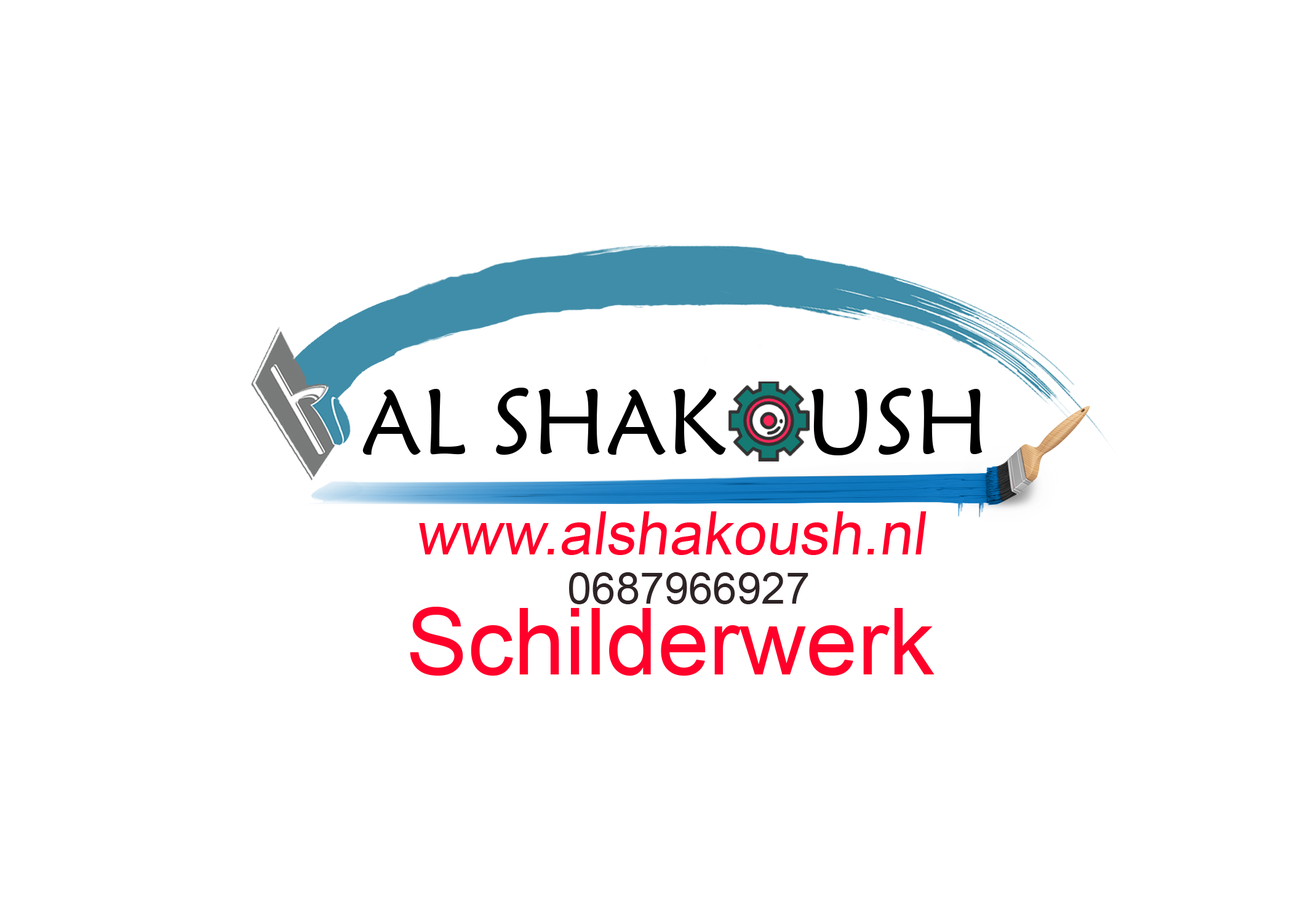
<style>
.page{position:relative;width:1292px;height:923px;background:#ffffff}
.page>*{position:absolute;margin:0}
.t1{font:60.4px "ArialMT";color:#ff002a}
.t2{font:43.6px "ArialMT";color:#2e2425}
.t3{font:92.3px "ArialMT";color:#ff002a}
</style>
<div class="page">
<p class="t1" style="left:419px;top:511px;width:508px;height:44px">www.alshakoush.nl</p>
<p class="t2" style="left:569px;top:572px;width:239px;height:32px">0687966927</p>
<p class="t3" style="left:410px;top:607px;width:525px;height:69px">Schilderwerk</p>
</div>
